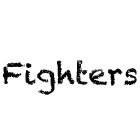
<style>
.page{position:relative;width:140px;height:140px;background:#ffffff}
.page>*{position:absolute;margin:0}
.t1{font:30px "Chalkduster";color:#050505}
</style>
<div class="page">
<p class="t1" style="left:2px;top:60px;width:135px;height:35px">Fighters</p>
</div>
